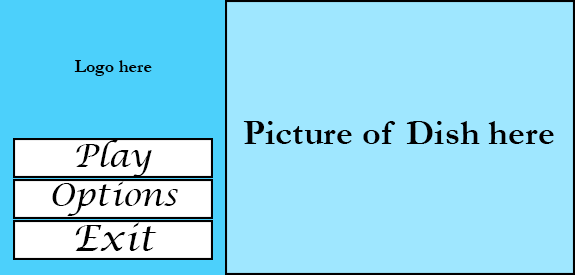
<style>
.page{position:relative;width:575px;height:275px;background:#9fe7ff}
.page>*{position:absolute;margin:0}
.t1{font:18px "Garamond-Bold";color:#000000}
.t2{font:36px "Garamond-Bold";color:#000000}
.t3{font:32px "LucidaCalligraphy-Italic";color:#000000}
.t4{font:36px "LucidaCalligraphy-Italic";color:#000000}
</style>
<div class="page">
<p class="t1" style="left:74px;top:60px;width:78px;height:16px">Logo here</p>
<p class="t2" style="left:243px;top:121px;width:311px;height:23px">Picture of Dish here</p>
<p class="t3" style="left:76px;top:140px;width:76px;height:37px">Play</p>
<p class="t3" style="left:52px;top:181px;width:126px;height:35px">Options</p>
<p class="t4" style="left:75px;top:222px;width:82px;height:29px">Exit</p>
</div>
